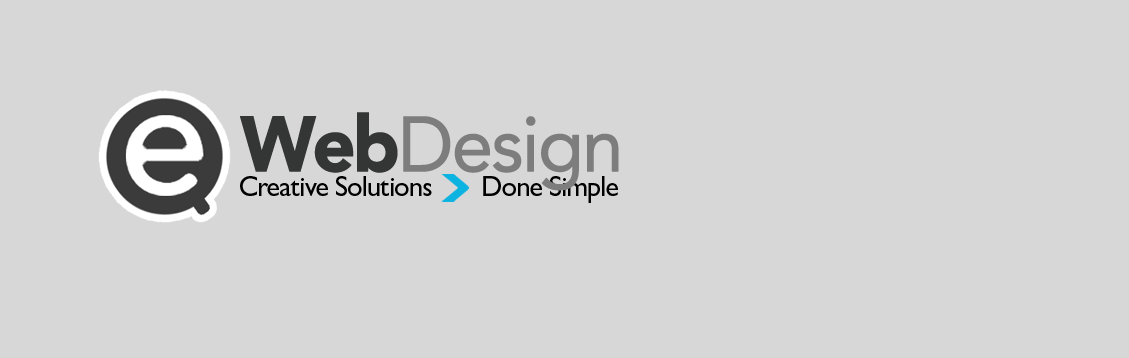
<style>
.page{position:relative;width:1129px;height:358px;background:#d7d7d7}
.page>*{position:absolute;margin:0}
.t1{font:77.8px "AvenirLTStd-Black";letter-spacing:-0.07em;color:#343535;font-weight:bold;scale:0.97 1}
.t2{font:77.5px "AvenirLTStd-Roman";letter-spacing:-0.05em;color:#7d7d7d;font-weight:bold;scale:0.97 1}
.t3{font:28.4px "GillSansMTPro-Medium";letter-spacing:-0.03em;color:#000000}
</style>
<div class="page">
<p class="t1" style="left:240px;top:112px;width:158px;height:61px">Web</p>
<p class="t2" style="left:403px;top:116px;width:216px;height:75px">Design</p>
<p class="t3" style="left:240px;top:176px;width:192px;height:20px">Creative Solutions</p>
<p class="t3" style="left:483px;top:176px;width:135px;height:27px">Done Simple</p>
</div>
